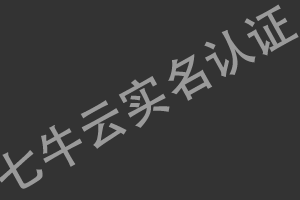
<style>
.page{position:relative;width:300px;height:200px;background:#333333}
.page>*{position:absolute;margin:0}
.t1{font:48px "AdobeHeitiStd-Regular";color:#9a9a9a}
</style>
<div class="page">
<p class="t1" style="left:0px;top:4px;width:299px;height:185px;rotate:-29deg">七牛云实名认证</p>
</div>
